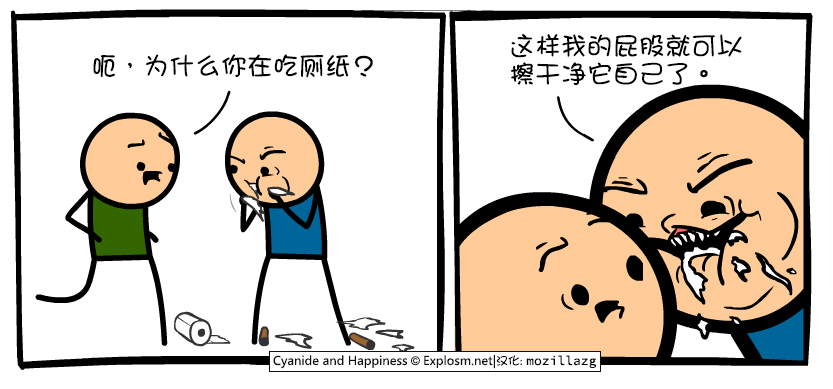
<style>
.page{position:relative;width:833px;height:389px;background:#ffffff}
.page>*{position:absolute;margin:0}
.t1{font:26px/28px "DFGirl";color:#000000}
.t2{font:26px "DFGirl";color:#000000}
</style>
<div class="page">
<p class="t1" style="left:510px;top:34px;width:232px;height:52px">这样我的屁股就可以<br>擦干净它自己了。</p>
<p class="t2" style="left:93px;top:54px;width:280px;height:24px">呃，为什么你在吃厕纸？</p>
</div>
